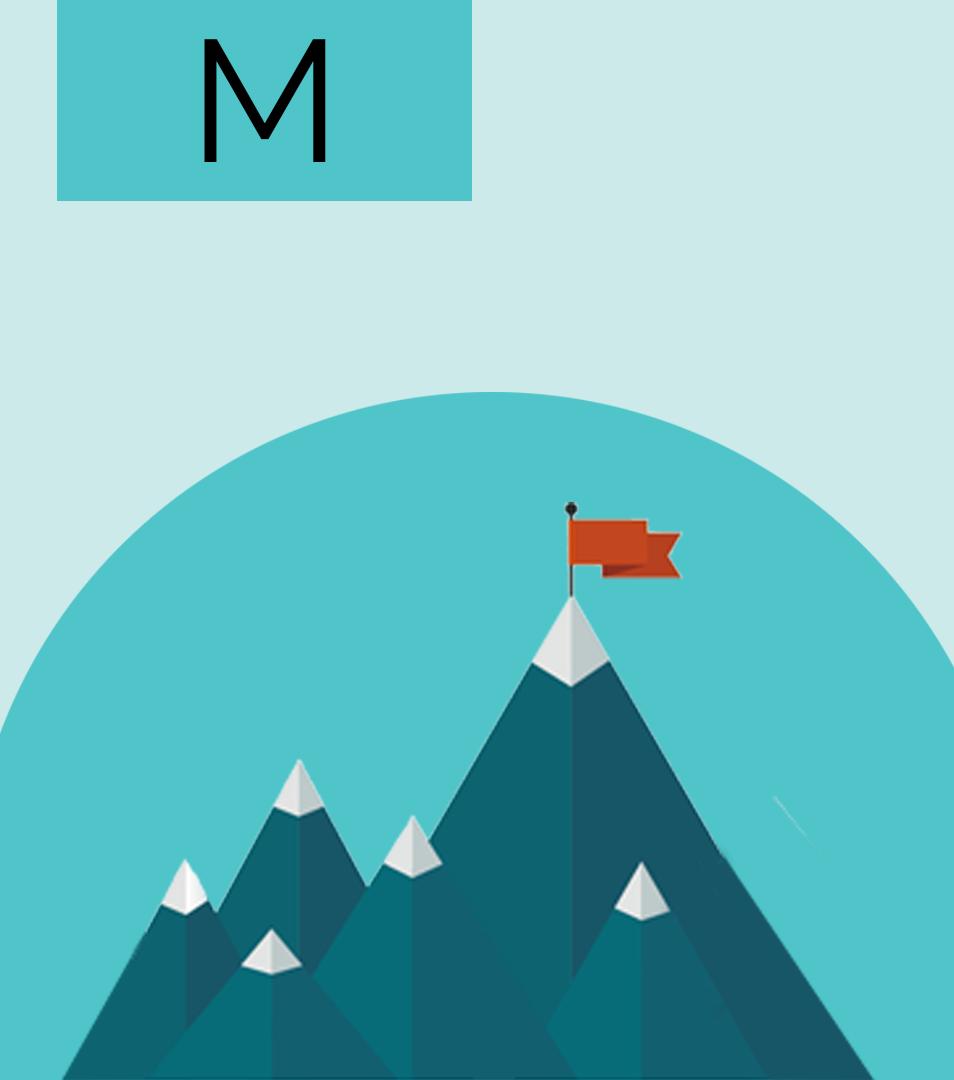
<style>
.page{position:relative;width:954px;height:1080px;background:#4fc4c9}
.page>*{position:absolute;margin:0}
.t1{font:172.8px "Raleway-Regular";color:#000000}
</style>
<div class="page">
<p class="t1" style="left:204px;top:39px;width:122px;height:123px">M</p>
</div>
